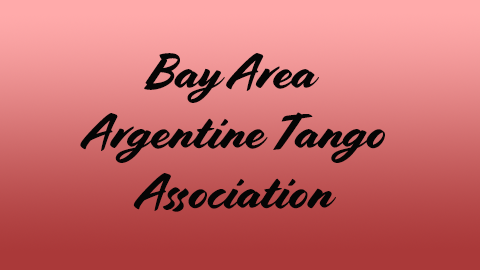
<style>
.page{position:relative;width:480px;height:270px}
.page>*{position:absolute;margin:0}
.t1{font:50px "Cortado";color:#050505}
</style>
<div class="page">
<p class="t1" style="left:80px;top:53px;width:305px;height:159px;text-align:center">Bay Area <br>Argentine Tango<br>Association</p>
</div>
